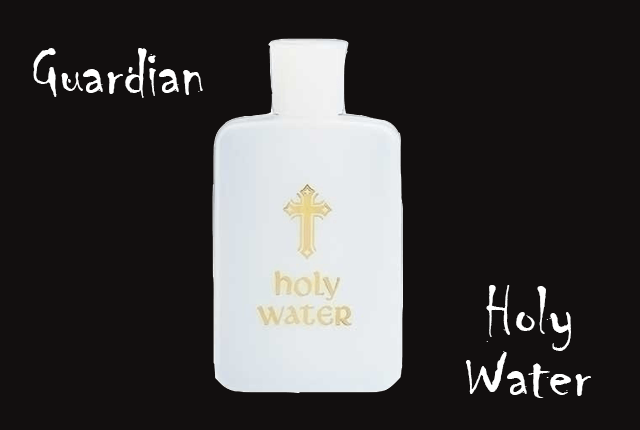
<style>
.page{position:relative;width:640px;height:430px;background:#120f0f}
.page>*{position:absolute;margin:0}
.t1{font:72px "Chiller-Regular";color:#ffffff}
</style>
<div class="page">
<p class="t1" style="left:33px;top:48px;width:170px;height:50px">Guardian</p>
<p class="t1" style="left:486px;top:285px;width:85px;height:66px">Holy</p>
<p class="t1" style="left:466px;top:351px;width:125px;height:47px">Water</p>
</div>
